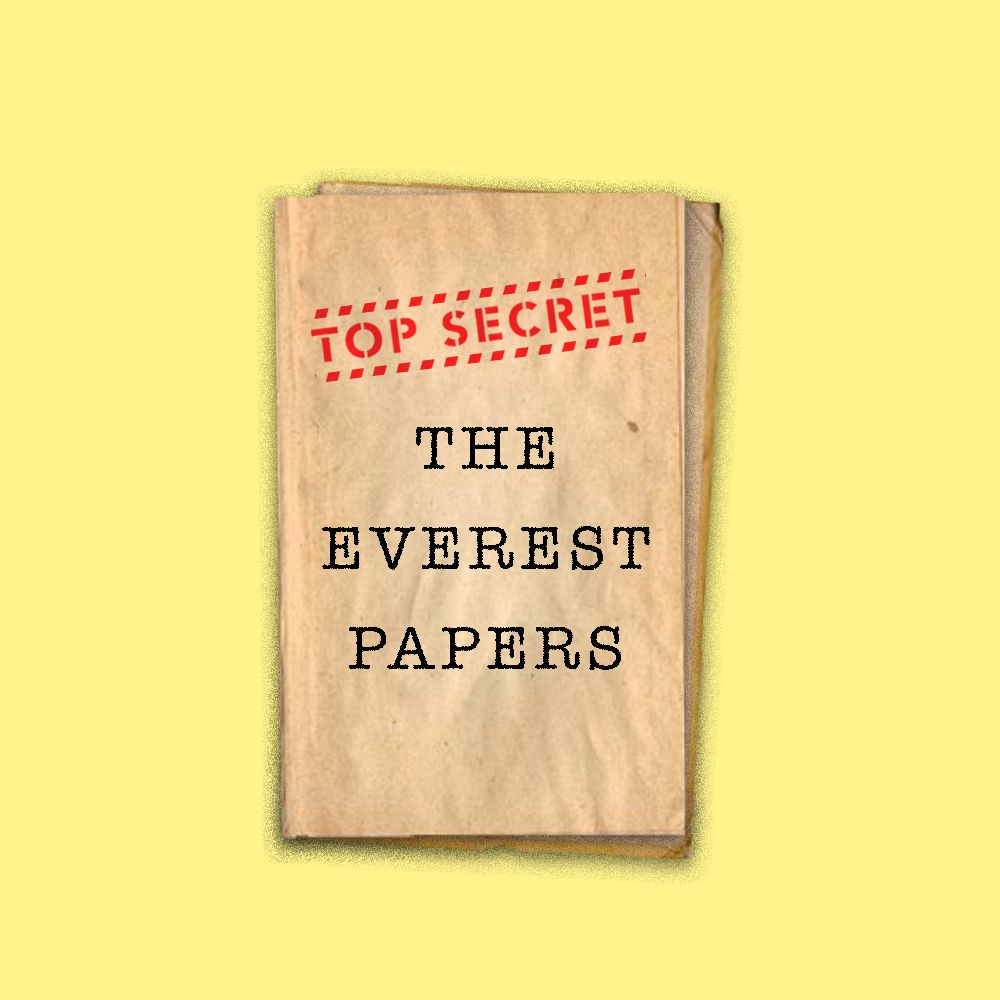
<style>
.page{position:relative;width:1000px;height:1000px;background:#fff38b}
.page>*{position:absolute;margin:0}
.t1{font:14.9px/100px "AmericanTypewriter";letter-spacing:0.1em;color:#000000}
</style>
<div class="page">
<p class="t1" style="left:322px;top:427px;width:328px;height:243px;text-align:center">THE <br>EVEREST PAPERS</p>
</div>
